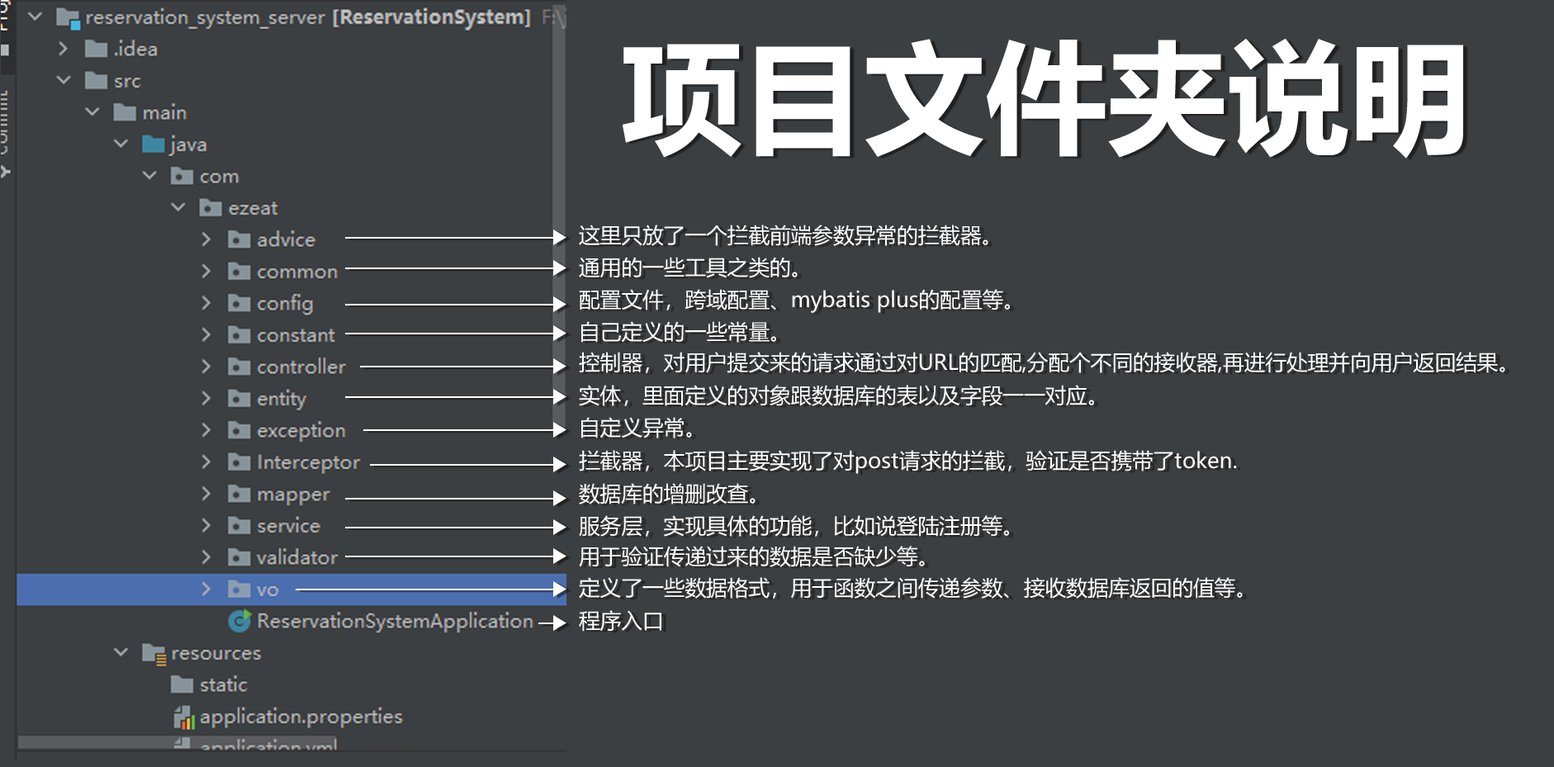
<style>
.page{position:relative;width:1554px;height:767px;background:#3c3f41}
.page>*{position:absolute;margin:0}
.t1{font:121.3px "MicrosoftYaHei-Bold";color:#ffffff}
.t2{font:21.2px "MicrosoftYaHei";color:#ffffff}
</style>
<div class="page">
<p class="t1" style="left:623px;top:39px;width:840px;height:120px">项目文件夹说明</p>
<p class="t2" style="left:579px;top:225px;width:410px;height:21px">这里只放了一个拦截前端参数异常的拦截器。</p>
<p class="t2" style="left:579px;top:257px;width:219px;height:21px">通用的一些工具之类的。</p>
<p class="t2" style="left:579px;top:289px;width:431px;height:24px">配置文件，跨域配置、mybatis plus的配置等。</p>
<p class="t2" style="left:581px;top:321px;width:195px;height:22px">自己定义的一些常量。</p>
<p class="t2" style="left:579px;top:352px;width:927px;height:21px">控制器，对用户提交来的请求通过对URL的匹配,分配个不同的接收器,再进行处理并向用户返回结果。</p>
<p class="t2" style="left:579px;top:385px;width:515px;height:21px">实体，里面定义的对象跟数据库的表以及字段一一对应。</p>
<p class="t2" style="left:581px;top:417px;width:111px;height:22px">自定义异常。</p>
<p class="t2" style="left:579px;top:450px;width:658px;height:24px">拦截器，本项目主要实现了对post请求的拦截，验证是否携带了token.</p>
<p class="t2" style="left:579px;top:483px;width:177px;height:22px">数据库的增删改查。</p>
<p class="t2" style="left:579px;top:515px;width:430px;height:22px">服务层，实现具体的功能，比如说登陆注册等。</p>
<p class="t2" style="left:579px;top:546px;width:346px;height:21px">用于验证传递过来的数据是否缺少等。</p>
<p class="t2" style="left:579px;top:577px;width:664px;height:22px">定义了一些数据格式，用于函数之间传递参数、接收数据库返回的值等。</p>
<p class="t2" style="left:579px;top:610px;width:83px;height:22px">程序入口</p>
</div>
